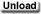
<style>
.page{position:relative;width:41px;height:14px;background:#ffffff}
.page>*{position:absolute;margin:0}
.t1{font:10px "Helvetica-Bold";color:#000000}
</style>
<div class="page">
<p class="t1" style="left:3px;top:1px;width:33px;height:8px">Unload</p>
</div>
